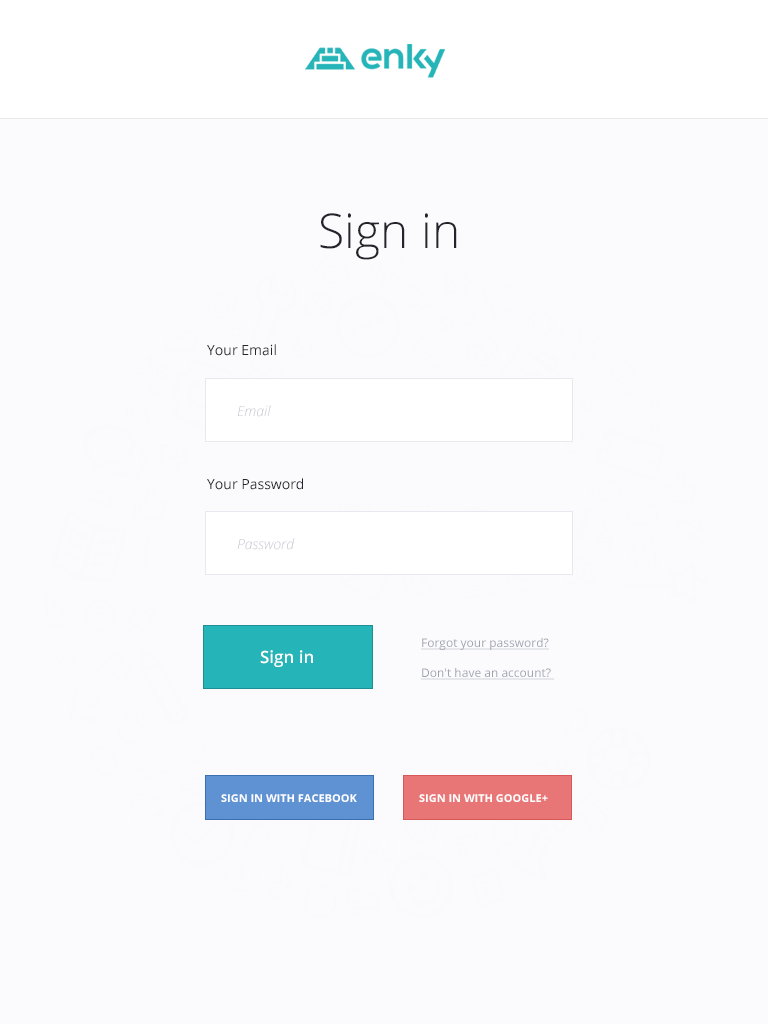
<style>
.page{position:relative;width:768px;height:1024px;background:#fbfbfd}
.page>*{position:absolute;margin:0}
.t1{font:48px "OpenSans-Light";color:#25232b}
.t2{font:14px "OpenSans";color:#25232b}
.t3{font:14px "OpenSansLight-Italic";color:#c0c1ce}
.t4{font:12px "OpenSans";color:#a0a1af;text-decoration:underline}
.t5{font:17px "OpenSans-Semibold";color:#ffffff}
.t6{font:11px "OpenSans-Bold";color:#ffffff;text-transform:uppercase}
</style>
<div class="page">
<p class="t1" style="left:320px;top:213px;width:137px;height:47px">Sign in</p>
<p class="t2" style="left:207px;top:344px;width:69px;height:12px">Your Email</p>
<p class="t3" style="left:237px;top:405px;width:34px;height:12px">Email</p>
<p class="t2" style="left:207px;top:478px;width:96px;height:12px">Your Password</p>
<p class="t3" style="left:237px;top:538px;width:58px;height:12px">Password</p>
<p class="t4" style="left:421px;top:638px;width:128px;height:12px">Forgot your password?</p>
<p class="t5" style="left:260px;top:650px;width:53px;height:17px">Sign in</p>
<p class="t4" style="left:421px;top:668px;width:134px;height:12px">Don't have an account?</p>
<p class="t6" style="left:221px;top:794px;width:136px;height:8px">Sign in with facebook</p>
<p class="t6" style="left:419px;top:794px;width:129px;height:8px">Sign in with google+</p>
</div>
